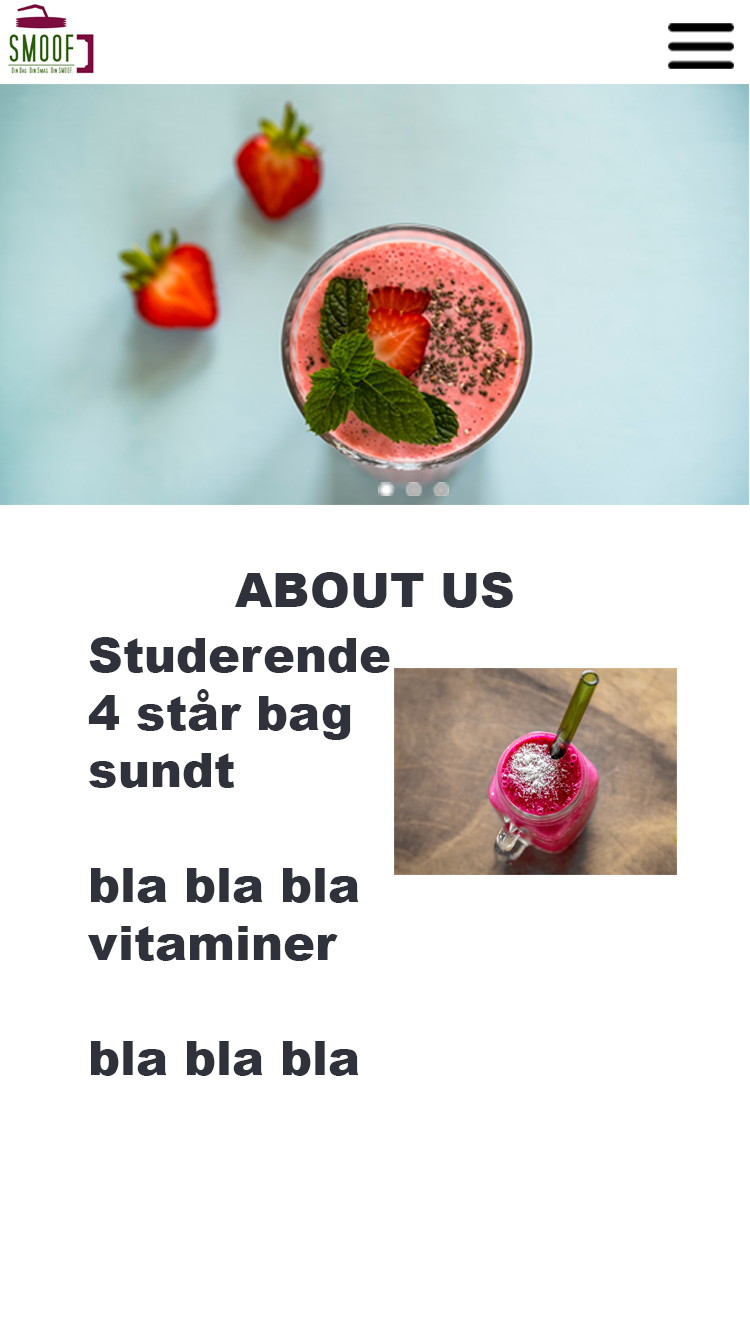
<style>
.page{position:relative;width:750px;height:1334px;background:#ffffff}
.page>*{position:absolute;margin:0}
.t1{font:48px "Arial-Black";color:#2f323a}
</style>
<div class="page">
<p class="t1" style="left:235px;top:572px;width:278px;height:36px">ABOUT US</p>
<p class="t1" style="left:88px;top:637px;width:302px;height:439px">Studerende<br>4 står bag<br>sundt<br><br>bla bla bla <br>vitaminer<br><br>bla bla bla</p>
</div>
